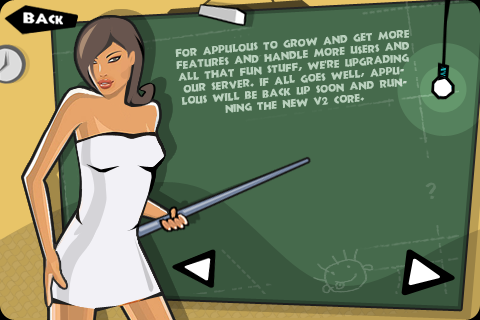
<style>
.page{position:relative;width:480px;height:320px;background:#466a4c}
.page>*{position:absolute;margin:0}
.t1{font:11px "Newland";color:#b9d0bd}
</style>
<div class="page">
<p class="t1" style="left:175px;top:29px;width:235px;height:84px;rotate:-5deg">For Appulous to grow and get more features and handle more users and all that fun stuff, we're upgrading our server. If all goes well, Appulous will be back up soon and running the new V2 Core.</p>
</div>
